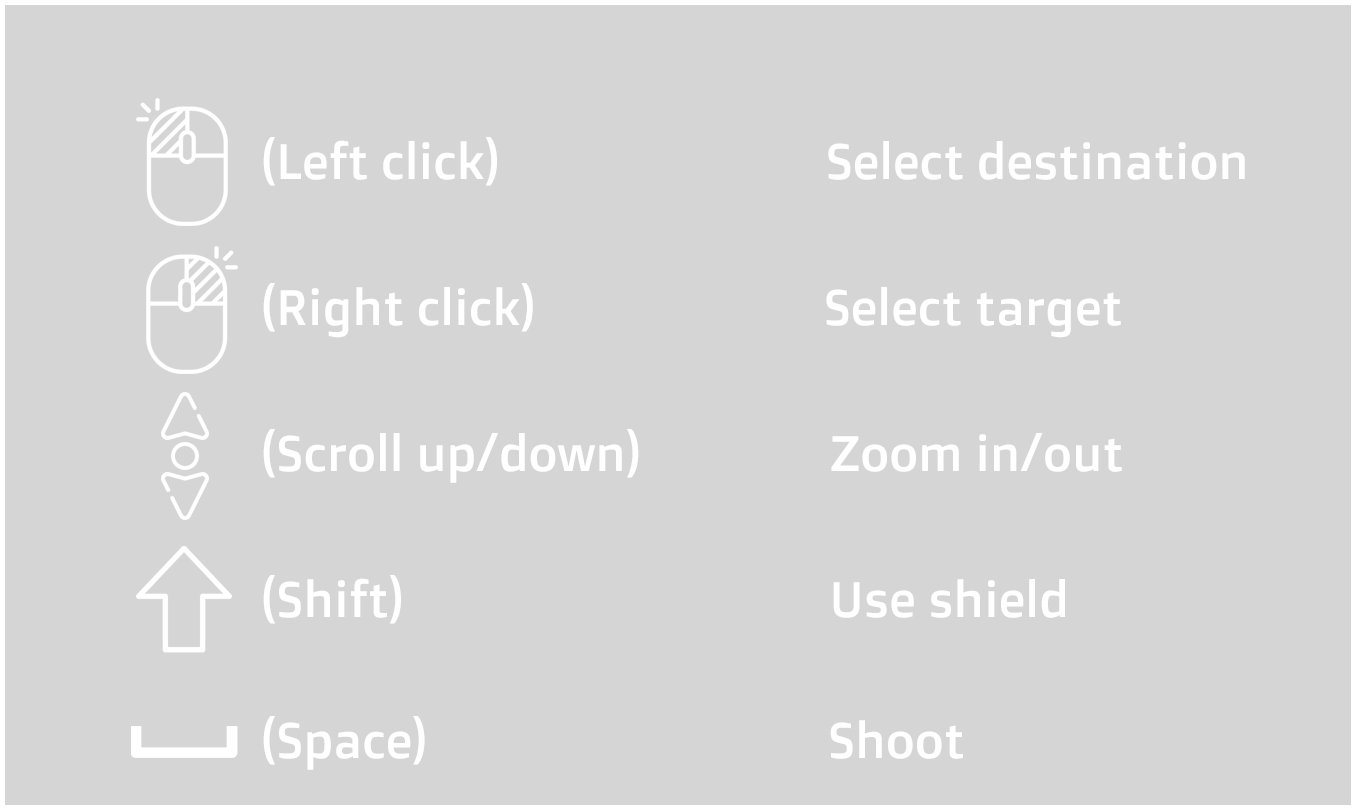
<style>
.page{position:relative;width:1356px;height:810px;background:#d5d5d5}
.page>*{position:absolute;margin:0}
.t1{font:50px "DoppioOne-Regular";color:#ffffff}
</style>
<div class="page">
<p class="t1" style="left:263px;top:137px;width:982px;height:49px">(Left click)                          Select destination</p>
<p class="t1" style="left:263px;top:283px;width:858px;height:55px">(Right click)                       Select target</p>
<p class="t1" style="left:263px;top:429px;width:859px;height:54px">(Scroll up/down)               Zoom in/out</p>
<p class="t1" style="left:263px;top:575px;width:802px;height:49px">(Shift)                                  Use shield</p>
<p class="t1" style="left:263px;top:716px;width:700px;height:54px">(Space)                                Shoot</p>
</div>
